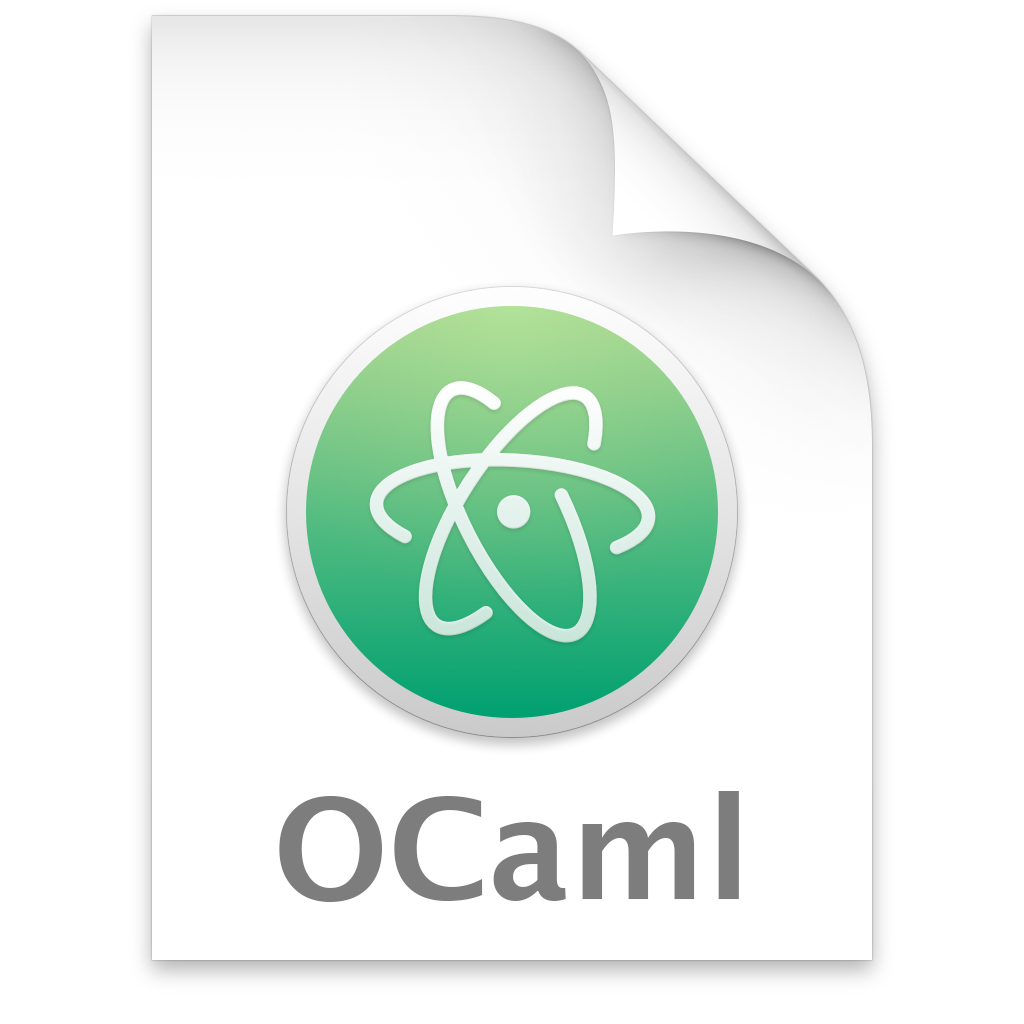
<style>
.page{position:relative;width:1024px;height:1024px;background:#ffffff}
.page>*{position:absolute;margin:0}
.t1{font:140px "LucidaGrande-Bold";color:#7d7d7d}
</style>
<div class="page">
<p class="t1" style="left:279px;top:791px;width:460px;height:111px">OCaml</p>
</div>
